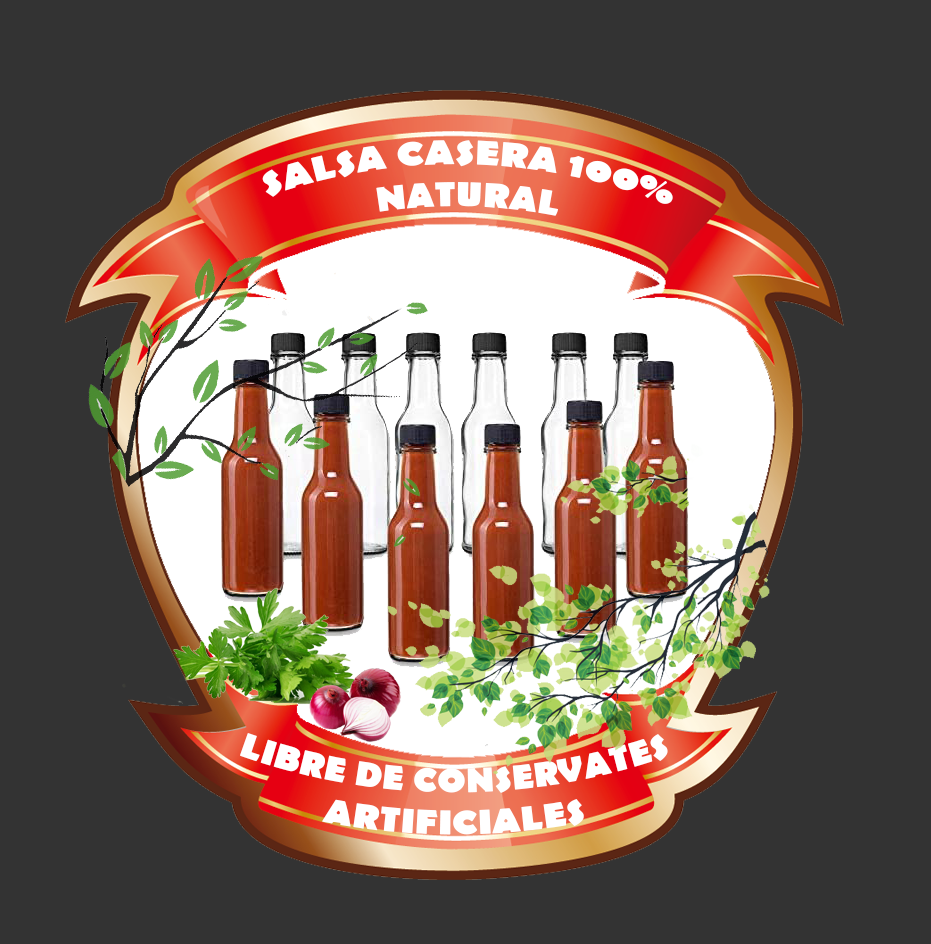
<style>
.page{position:relative;width:931px;height:944px;background:#333333}
.page>*{position:absolute;margin:0}
.t1{font:35px "BerlinSansFB-Bold";color:#ffffff;text-transform:uppercase}
</style>
<div class="page">
<p class="t1" style="left:262px;top:140px;width:411px;height:76px;rotate:1deg">salsa casera 100% natural</p>
<p class="t1" style="left:240px;top:733px;width:428px;height:102px;text-align:center">LIBRE DE CONSERVATES ARTIFICIALES</p>
</div>
